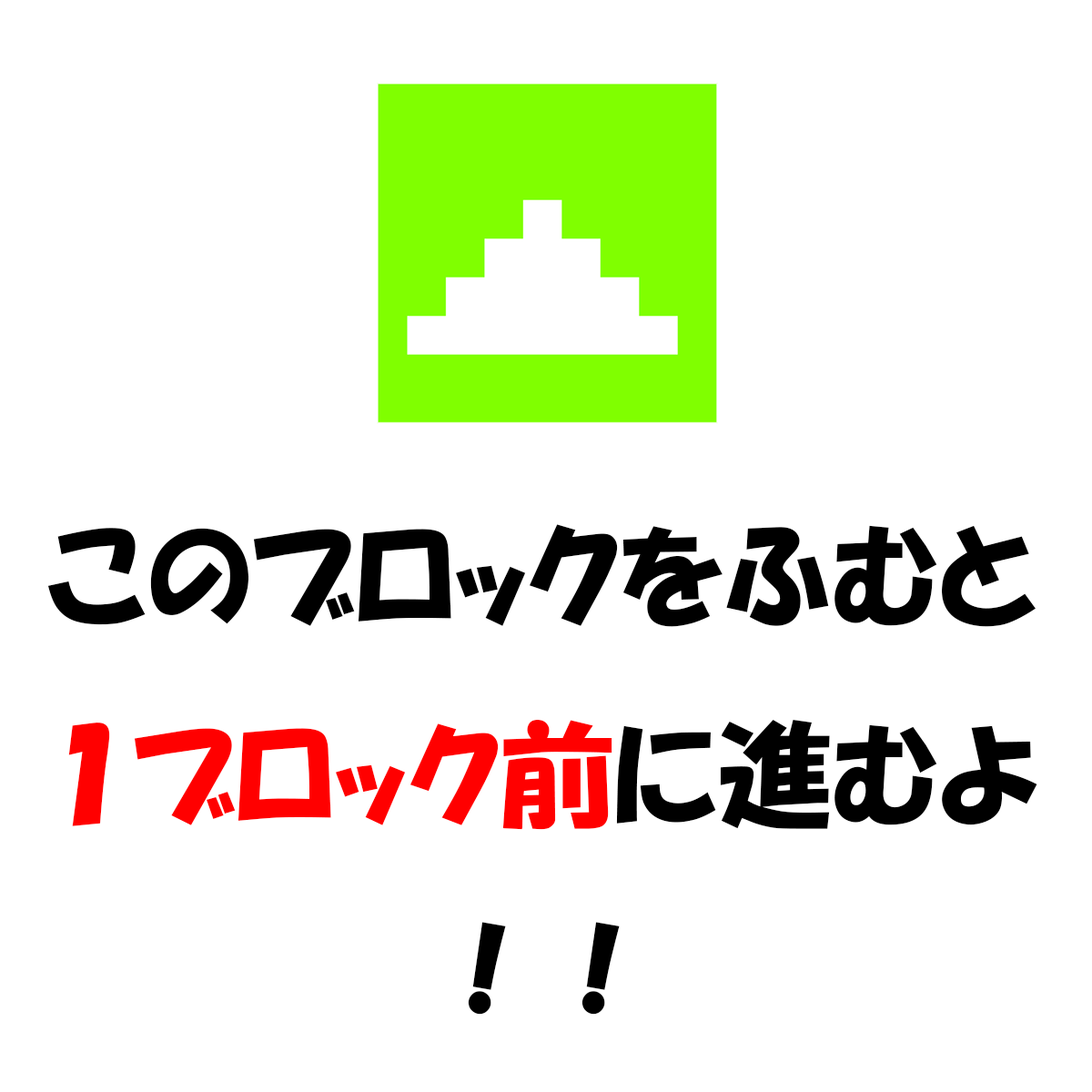
<style>
.page{position:relative;width:1092px;height:1092px;background:#ffffff}
.page>*{position:absolute;margin:0}
.t1{font:113.7px "HGPSoeiKakupoptai";color:#000000}
.t2{font:113.7px "HGPSoeiKakupoptai";color:#ff0000}
</style>
<div class="page">
<p class="t1" style="left:47px;top:524px;width:990px;height:491px;text-align:center">このブロックをふむと<br><span class="t2">１ブロック前</span>に進むよ<br>！！</p>
</div>
